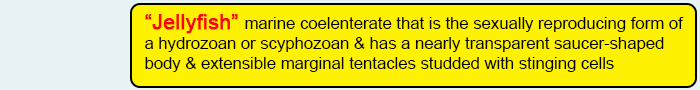
<style>
.page{position:relative;width:700px;height:90px;background:#fff200}
.page>*{position:absolute;margin:0}
.t1{font:16.7px "ArialMT";color:#020202}
.t2{font:20.8px "ArialMT";color:#fd010d;font-weight:bold}
</style>
<div class="page">
<p class="t1" style="left:145px;top:14px;width:539px;height:58px"><span class="t2">“Jellyfish” </span>marine coelenterate that is the sexually reproducing form of <br>a hydrozoan or scyphozoan &amp; has a nearly transparent saucer-shaped <br>body &amp; extensible marginal tentacles studded with stinging cells</p>
</div>
